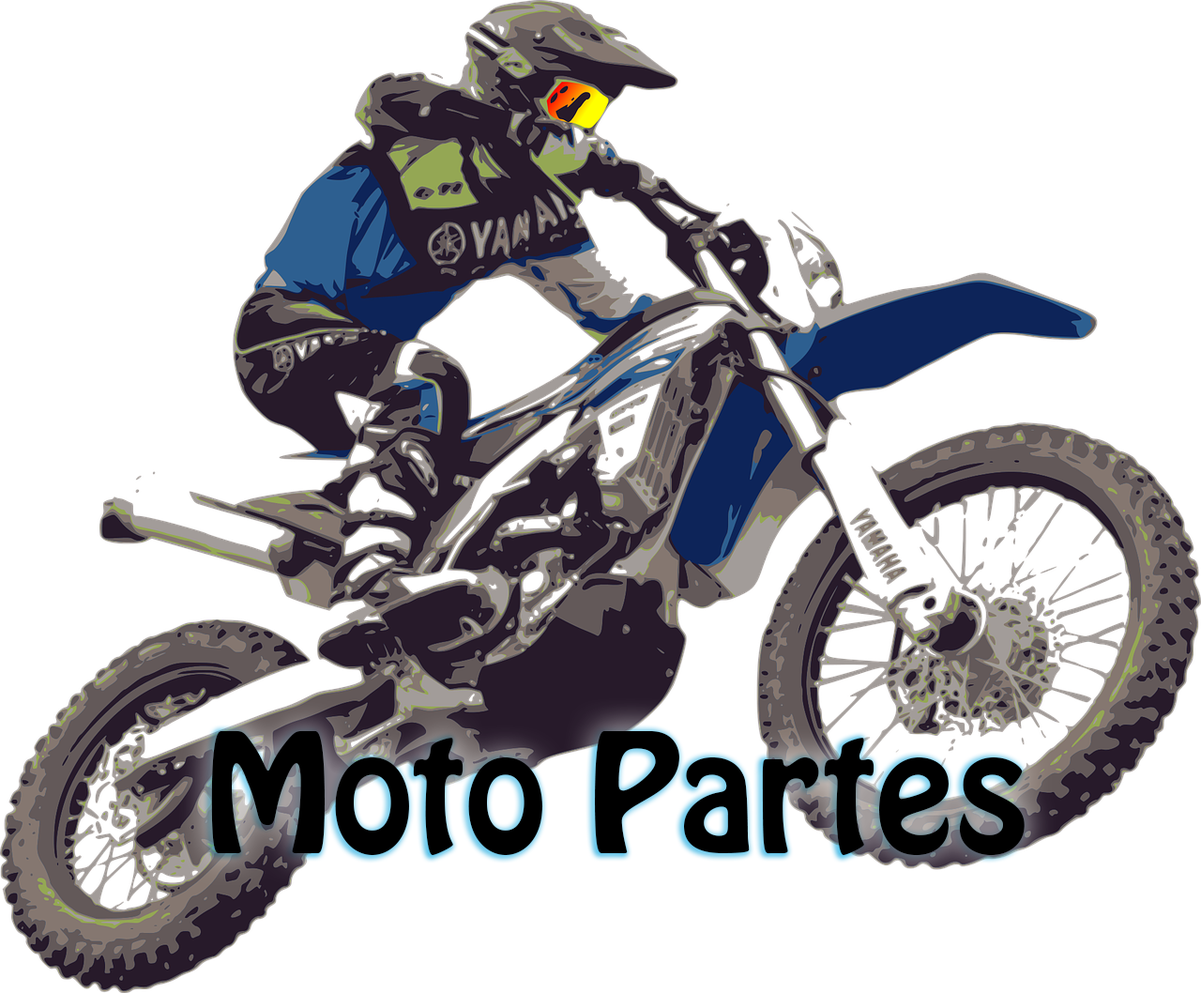
<style>
.page{position:relative;width:1201px;height:993px;background:#ffffff}
.page>*{position:absolute;margin:0}
.t1{font:147px "HoboStd";color:#000000}
</style>
<div class="page">
<p class="t1" style="left:211px;top:730px;width:814px;height:126px">Moto Partes</p>
</div>
